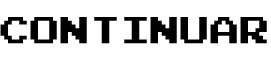
<style>
.page{position:relative;width:271px;height:59px;background:#ffffff}
.page>*{position:absolute;margin:0}
.t1{font:30px "PressStart2P";color:#000000}
</style>
<div class="page">
<p class="t1" style="left:0px;top:17px;width:267px;height:27px">CONTINUAR</p>
</div>
